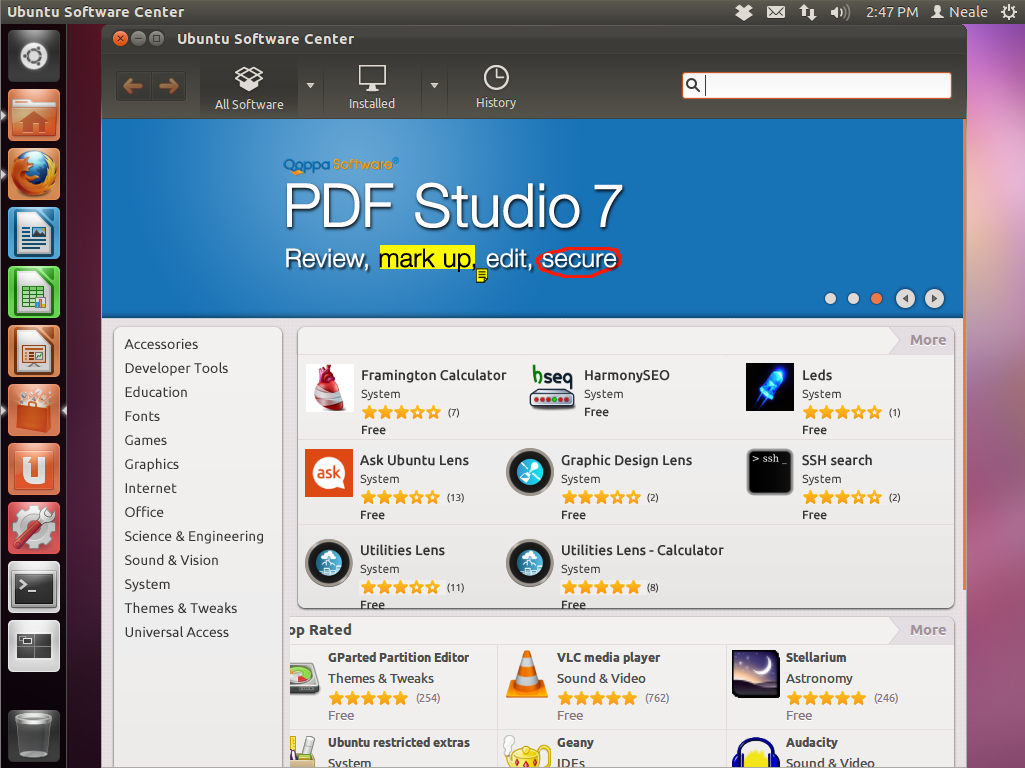
<style>
.page{position:relative;width:1025px;height:768px}
.page>*{position:absolute;margin:0}
.t1{font:14px/24px "Ubuntu";color:#333333}
.t2{font:14px/18px "Ubuntu-Medium";color:#333333}
.t3{font:12px/18px "Ubuntu";color:#333333}
.t4{font:12px/18px "Ubuntu-Medium";color:#333333}
.t5{font:10px "Ubuntu";color:#333333}
.t6{font:10px "Ubuntu"}
</style>
<div class="page">
<p class="t1" style="left:124px;top:338px;width:139px;height:299px">Accessories<br>Developer Tools<br>Education<br>Fonts<br>Games<br>Graphics<br>Internet<br>Office<br>Science &amp; Engineering<br>Sound &amp; Vision<br>System<br>Themes &amp; Tweaks<br>Universal Access</p>
<p class="t2" style="left:361px;top:369px;width:146px;height:66px">Framington Calculator<br><span class="t3">System<br><br></span><span class="t4">Free</span></p>
<p class="t2" style="left:584px;top:370px;width:86px;height:47px">HarmonySEO<br><span class="t3">System<br></span><span class="t4">Free</span></p>
<p class="t3" style="left:802px;top:369px;width:39px;height:66px"><span class="t2">Leds<br></span>System<br><br><span class="t4">Free</span></p>
<p class="t5" style="left:448px;top:408px;width:11px;height:10px">(7)</p>
<p class="t5" style="left:889px;top:408px;width:11px;height:10px">(1)</p>
<p class="t2" style="left:360px;top:454px;width:109px;height:66px">Ask Ubuntu Lens<br><span class="t3">System<br><br></span><span class="t4">Free</span></p>
<p class="t2" style="left:561px;top:454px;width:131px;height:66px">Graphic Design Lens<br><span class="t3">System<br><br></span><span class="t4">Free</span></p>
<p class="t2" style="left:802px;top:454px;width:70px;height:66px">SSH search<br><span class="t3">System<br><br></span><span class="t4">Free</span></p>
<p class="t6" style="left:447px;top:493px;width:17px;height:10px">(13)</p>
<p class="t5" style="left:647px;top:493px;width:11px;height:10px">(2)</p>
<p class="t5" style="left:889px;top:493px;width:11px;height:10px">(2)</p>
<p class="t2" style="left:360px;top:544px;width:85px;height:66px">Utilities Lens<br><span class="t3">System<br><br></span><span class="t4">Free</span></p>
<p class="t2" style="left:561px;top:544px;width:163px;height:66px">Utilities Lens - Calculator<br><span class="t3">System<br><br></span><span class="t4">Free</span></p>
<p class="t5" style="left:447px;top:583px;width:17px;height:10px">(11)</p>
<p class="t5" style="left:647px;top:583px;width:11px;height:10px">(8)</p>
</div>
